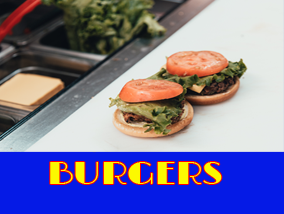
<style>
.page{position:relative;width:284px;height:214px;background:#051ae6}
.page>*{position:absolute;margin:0}
.t1{font:32.1px "Limelight";color:#fcf900;scale:1.12 1}
</style>
<div class="page">
<p class="t1" style="left:50px;top:162px;width:172px;height:22px">BURGERS</p>
</div>
